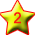
<style>
.page{position:relative;width:35px;height:35px;background:#ffffff}
.page>*{position:absolute;margin:0}
.t1{font:15px "ArialMT";color:#fc1812}
</style>
<div class="page">
<p class="t1" style="left:13px;top:12px;width:8px;height:12px">2</p>
</div>
